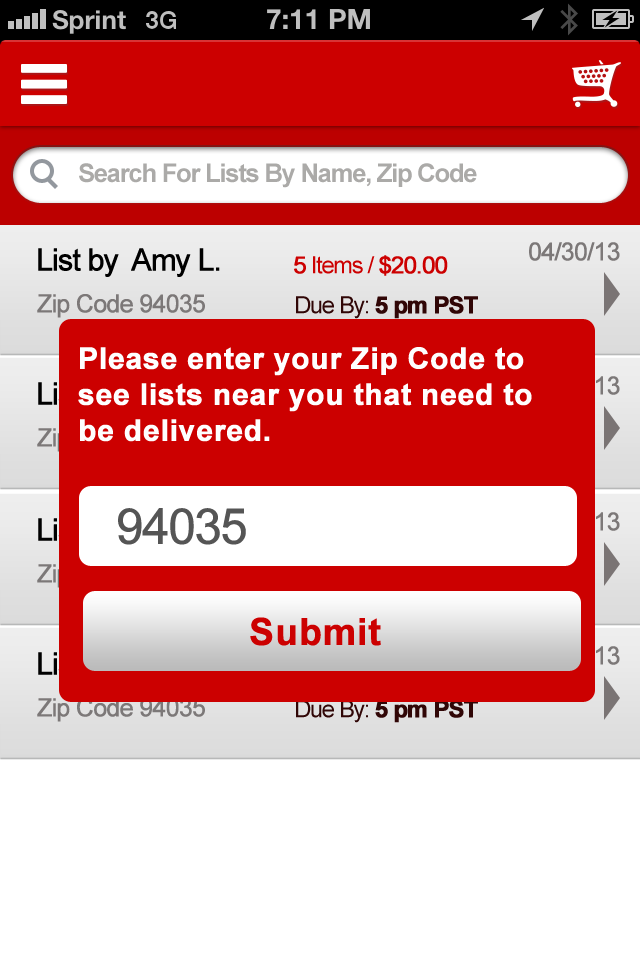
<style>
.page{position:relative;width:640px;height:960px;background:#ffffff}
.page>*{position:absolute;margin:0}
.t1{font:25.7px "Arial-BoldMT";letter-spacing:-0.05em;color:#abaaa8}
.t2{font:25px "ArialMT";letter-spacing:-0.055em;color:#7c7878;font-weight:bold}
.t3{font:30.4px "ArialMT";letter-spacing:-0.055em;color:#000000;font-weight:bold}
.t4{font:23.7px "ArialMT";letter-spacing:-0.055em;color:#cc0000}
.t5{font:23.7px "ArialMT";letter-spacing:-0.055em;color:#cc0000;font-weight:bold}
.t6{font:23.7px "Arial-BoldMT";letter-spacing:-0.055em;color:#300606;font-weight:bold}
.t7{font:23.7px "ArialMT";letter-spacing:-0.055em;color:#300606}
.t8{font:30px "Arial-BoldMT";color:#fefefe;font-weight:bold}
.t9{font:25px "ArialMT";letter-spacing:-0.055em;color:#cc0000;font-weight:bold}
.t10{font:49.4px "ArialMT";letter-spacing:-0.055em;color:#555555;font-weight:bold}
.t11{font:37.3px "Arial-BoldMT";color:#cc0000;font-weight:bold}
.t12{font:25px "ArialMT";letter-spacing:-0.055em;font-weight:bold}
</style>
<div class="page">
<p class="t1" style="left:79px;top:163px;width:398px;height:25px">Search For Lists By Name, Zip Code</p>
<p class="t2" style="left:529px;top:242px;width:91px;height:19px">04/30/13</p>
<p class="t3" style="left:38px;top:248px;width:182px;height:29px">List by  Amy L.</p>
<p class="t4" style="left:294px;top:255px;width:154px;height:21px"><span class="t5">5</span> Items / <span class="t5">$20.00</span></p>
<p class="t2" style="left:37px;top:294px;width:168px;height:24px">Zip Code 94035</p>
<p class="t6" style="left:296px;top:296px;width:182px;height:23px"><span class="t7">Due By: </span>5 pm PST</p>
<p class="t8" style="left:78px;top:347px;width:454px;height:95px">Please enter your Zip Code to see lists near you that need to be delivered.</p>
<p class="t9" style="left:529px;top:376px;width:91px;height:19px">04/30/13</p>
<p class="t10" style="left:118px;top:508px;width:128px;height:37px">94035</p>
<p class="t11" style="left:250px;top:617px;width:131px;height:29px">Submit</p>
<p class="t12" style="left:529px;top:646px;width:91px;height:19px">04/30/13</p>
<p class="t2" style="left:37px;top:698px;width:168px;height:24px">Zip Code 94035</p>
<p class="t6" style="left:296px;top:700px;width:182px;height:23px"><span class="t7">Due By: </span>5 pm PST</p>
</div>
